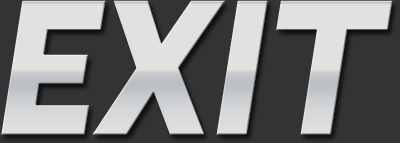
<style>
.page{position:relative;width:400px;height:143px;background:#333333}
.page>*{position:absolute;margin:0}
.t1{font:185.2px "FugazOne-Regular";color:#dfdfdf;scale:0.89 1}
</style>
<div class="page">
<p class="t1" style="left:1px;top:0px;width:392px;height:135px">EXIT</p>
</div>
